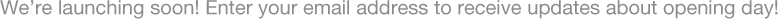
<style>
.page{position:relative;width:780px;height:19px;background:#ffffff}
.page>*{position:absolute;margin:0}
.t1{font:19.6px "HelveticaNeueLTPro-Roman";color:#8b8b8b}
</style>
<div class="page">
<p class="t1" style="left:0px;top:0px;width:778px;height:19px">We’re launching soon! Enter your email address to receive updates about opening day!</p>
</div>
